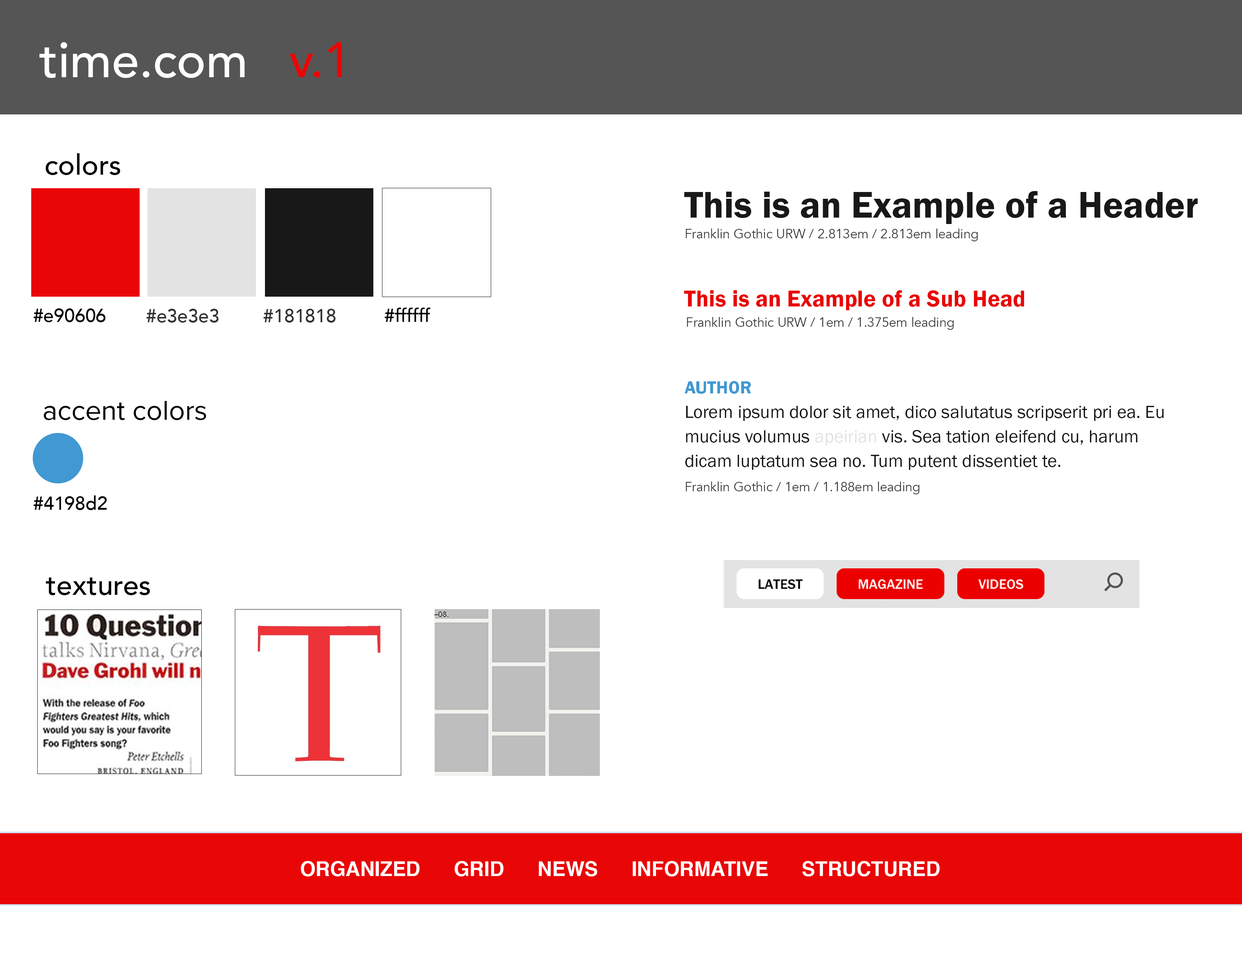
<style>
.page{position:relative;width:1242px;height:960px;background:#ffffff}
.page>*{position:absolute;margin:0}
.t1{font:49.3px "Avenir-Medium";color:#ffffff}
.t2{font:49.3px "Avenir-Medium";color:#e90606}
.t3{font:28.2px "Avenir-Medium";color:#030000}
.t4{font:38.4px "FranklinGothicURW-Dem";color:#181818}
.t5{font:13px "Avenir-Book";color:#333333}
.t6{font:23.6px "FranklinGothicURW-Dem";color:#e90606}
.t7{font:18.8px "Avenir-Medium";color:#030000}
.t8{font:18.8px "Avenir-Medium";color:#333333}
.t9{font:18.8px "Avenir-Medium";color:#313131}
.t10{font:18.8px "Avenir-Medium";color:#000102}
.t11{font:18.3px/24.5px "FranklinGothicURW-Boo";color:#181818}
.t12{font:18.3px/24.5px "FranklinGothicURW-Dem";color:#4198d2}
.t13{font:18.3px/24.5px "FranklinGothicURW-Boo";color:#e3e3e3}
.t14{font:28.2px "ProximaNova-Regular";color:#030000}
.t15{font:20.1px "Helvetica-Bold";color:#ffffff;text-transform:uppercase}
</style>
<div class="page">
<p class="t1" style="left:39px;top:42px;width:303px;height:36px">time.com   <span class="t2">v.1</span></p>
<p class="t3" style="left:46px;top:153px;width:74px;height:22px">colors</p>
<p class="t4" style="left:684px;top:191px;width:514px;height:33px">This is an Example of a Header</p>
<p class="t5" style="left:686px;top:228px;width:292px;height:13px">Franklin Gothic URW / 2.813em / 2.813em leading</p>
<p class="t6" style="left:684px;top:290px;width:340px;height:21px">This is an Example of a Sub Head</p>
<p class="t7" style="left:34px;top:308px;width:71px;height:14px">#e90606</p>
<p class="t8" style="left:146px;top:309px;width:73px;height:14px">#e3e3e3</p>
<p class="t9" style="left:264px;top:309px;width:72px;height:14px">#181818</p>
<p class="t10" style="left:385px;top:308px;width:46px;height:14px">#ffffff</p>
<p class="t5" style="left:687px;top:317px;width:267px;height:13px">Franklin Gothic URW / 1em / 1.375em leading</p>
<p class="t11" style="left:685px;top:381px;width:479px;height:89px"><span class="t12">AUTHOR<br></span>Lorem ipsum dolor sit amet, dico salutatus scripserit pri ea. Eu mucius volumus <span class="t13">apeirian</span> vis. Sea tation eleifend cu, harum dicam luptatum sea no. Tum putent dissentiet te.</p>
<p class="t14" style="left:44px;top:401px;width:162px;height:19px">accent colors</p>
<p class="t5" style="left:686px;top:481px;width:234px;height:13px">Franklin Gothic / 1em / 1.188em leading</p>
<p class="t10" style="left:34px;top:495px;width:73px;height:15px">#4198d2</p>
<p class="t3" style="left:46px;top:577px;width:104px;height:18px">textures</p>
<p class="t15" style="left:301px;top:861px;width:639px;height:15px">ORGANIZED      GRID      NEWS      INFORMATIVE      STRUCTURED</p>
</div>
